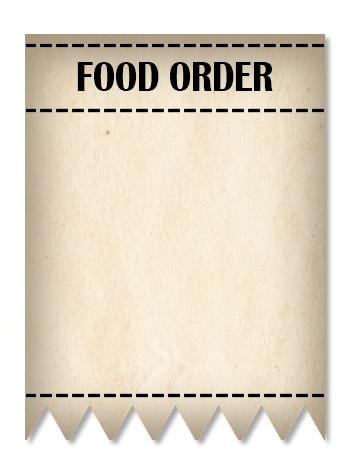
<style>
.page{position:relative;width:350px;height:474px;background:#ffffff}
.page>*{position:absolute;margin:0}
.t1{font:43.9px "BritannicBold";color:#000000;scale:0.77 1}
</style>
<div class="page">
<p class="t1" style="left:77px;top:62px;width:196px;height:29px">FOOD ORDER</p>
</div>
